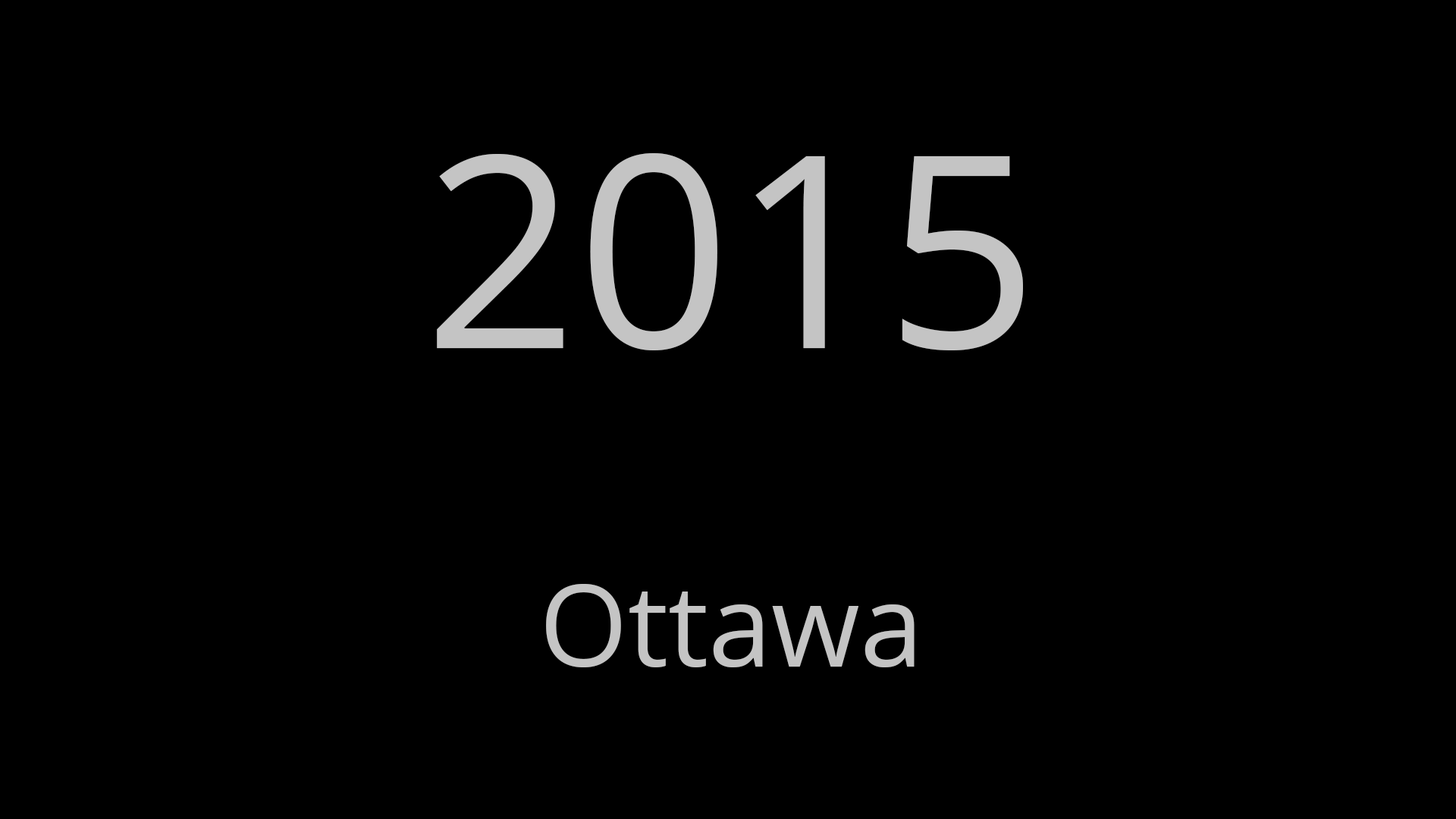
<style>
.page{position:relative;width:1456px;height:819px;background:#000000}
.page>*{position:absolute;margin:0}
.t1{font:113.7px "OpenSans";color:#c4c4c4}
.t2{font:268.6px "OpenSans";color:#c4c4c4}
</style>
<div class="page">
<p class="t1" style="left:437px;top:153px;width:586px;height:514px;text-align:center"><span class="t2">2015<br><br></span>Ottawa</p>
</div>
